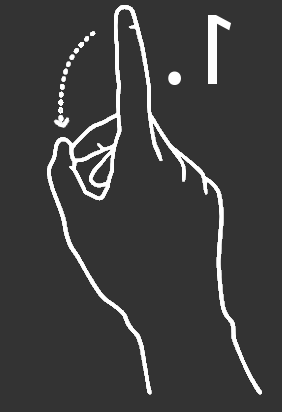
<style>
.page{position:relative;width:282px;height:412px;background:#333333}
.page>*{position:absolute;margin:0}
.t1{font:106.8px "MyriadPro-Regular";color:#ffffff}
</style>
<div class="page">
<p class="t1" style="left:168px;top:15px;width:64px;height:70px;rotate:180deg">1.</p>
</div>
